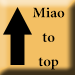
<style>
.page{position:relative;width:75px;height:75px;background:#f3bf63}
.page>*{position:absolute;margin:0}
.t1{font:20.3px "AdobeArabic-Bold";color:#000000}
</style>
<div class="page">
<p class="t1" style="left:32px;top:7px;width:33px;height:63px;text-align:center">Miao<br>to<br>top</p>
</div>
